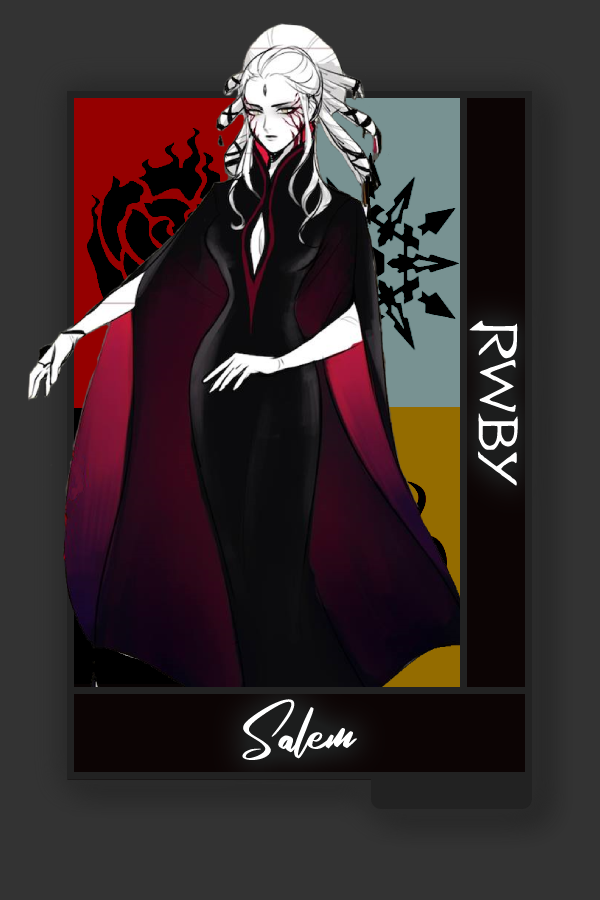
<style>
.page{position:relative;width:600px;height:900px;background:#333333}
.page>*{position:absolute;margin:0}
.t1{font:61.3px "RWBY_Style";color:#ffffff;scale:1.25 1}
.t2{font:76.6px "RosegaFREE";color:#ffffff;scale:0.91 1}
</style>
<div class="page">
<p class="t1" style="left:469px;top:320px;width:49px;height:166px;rotate:90deg">RWBY</p>
<p class="t2" style="left:232px;top:684px;width:125px;height:80px">Salem</p>
</div>
